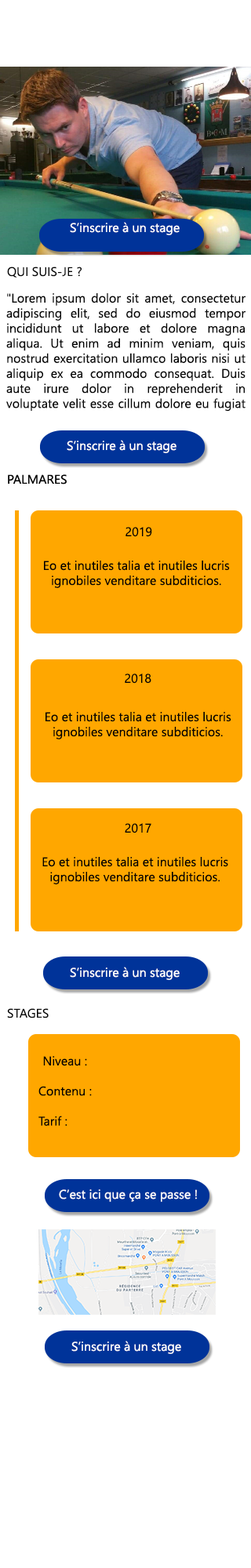
<style>
.page{position:relative;width:251px;height:1568px;background:#ffffff}
.page>*{position:absolute;margin:0}
.t1{font:12.5px "SegoeUI";color:#fcf9f9}
.t2{font:12.5px "SegoeUI";color:#050505}
.t3{font:9.4px "SegoeUI";color:#050505}
.t4{font:12.5px "SegoeUI";color:#000000}
.t5{font:9.4px "SegoeUI";color:#000000}
</style>
<div class="page">
<p class="t1" style="left:70px;top:222px;width:110px;height:13px">S’inscrire à un stage</p>
<p class="t2" style="left:7px;top:267px;width:75px;height:11px">QUI SUIS-JE ?</p>
<p class="t3" style="left:6px;top:293px;width:239px;height:119px;text-align:justify">"Lorem ipsum dolor sit amet, consectetur adipiscing elit, sed do eiusmod tempor incididunt ut labore et dolore magna aliqua. Ut enim ad minim veniam, quis nostrud exercitation ullamco laboris nisi ut aliquip ex ea commodo consequat. Duis aute irure dolor in reprehenderit in voluptate velit esse cillum dolore eu fugiat nulla pariatur. Excepteur sint occaecat cupidatat non proident, sunt in culpa qui officia deserunt mollit anim id est laborum."</p>
<p class="t1" style="left:67px;top:440px;width:109px;height:13px">S’inscrire à un stage</p>
<p class="t4" style="left:125px;top:527px;width:27px;height:10px">2019</p>
<p class="t5" style="left:44px;top:561px;width:186px;height:27px;text-align:center">Eo et inutiles talia et inutiles lucris ignobiles venditare subditicios.</p>
<p class="t5" style="left:125px;top:673px;width:26px;height:11px">2018</p>
<p class="t5" style="left:45px;top:712px;width:186px;height:27px;text-align:center">Eo et inutiles talia et inutiles lucris ignobiles venditare subditicios.</p>
<p class="t5" style="left:125px;top:823px;width:26px;height:10px">2017</p>
<p class="t5" style="left:42px;top:857px;width:186px;height:27px;text-align:center">Eo et inutiles talia et inutiles lucris ignobiles venditare subditicios.</p>
<p class="t1" style="left:70px;top:967px;width:110px;height:13px">S’inscrire à un stage</p>
<p class="t2" style="left:7px;top:1008px;width:42px;height:10px">STAGES</p>
<p class="t5" style="left:38px;top:1056px;width:54px;height:70px">Niveau :<br><br>Contenu :<br><br>Tarif :</p>
<p class="t1" style="left:59px;top:1189px;width:138px;height:13px">C’est ici que ça se passe !</p>
<p class="t1" style="left:71px;top:1341px;width:110px;height:13px">S’inscrire à un stage</p>
</div>
